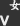
<style>
.page{position:relative;width:20px;height:26px;background:#333333}
.page>*{position:absolute;margin:0}
.t1{font:12px "DFKaiShu-SB-Estd-BF";color:#ececec;font-weight:bold}
.t2{font:18px "ArialMT";color:#ececec;font-weight:bold}
</style>
<div class="page">
<p class="t1" style="left:9px;top:0px;width:12px;height:11px">女</p>
<p class="t2" style="left:0px;top:15px;width:10px;height:11px">v</p>
</div>
